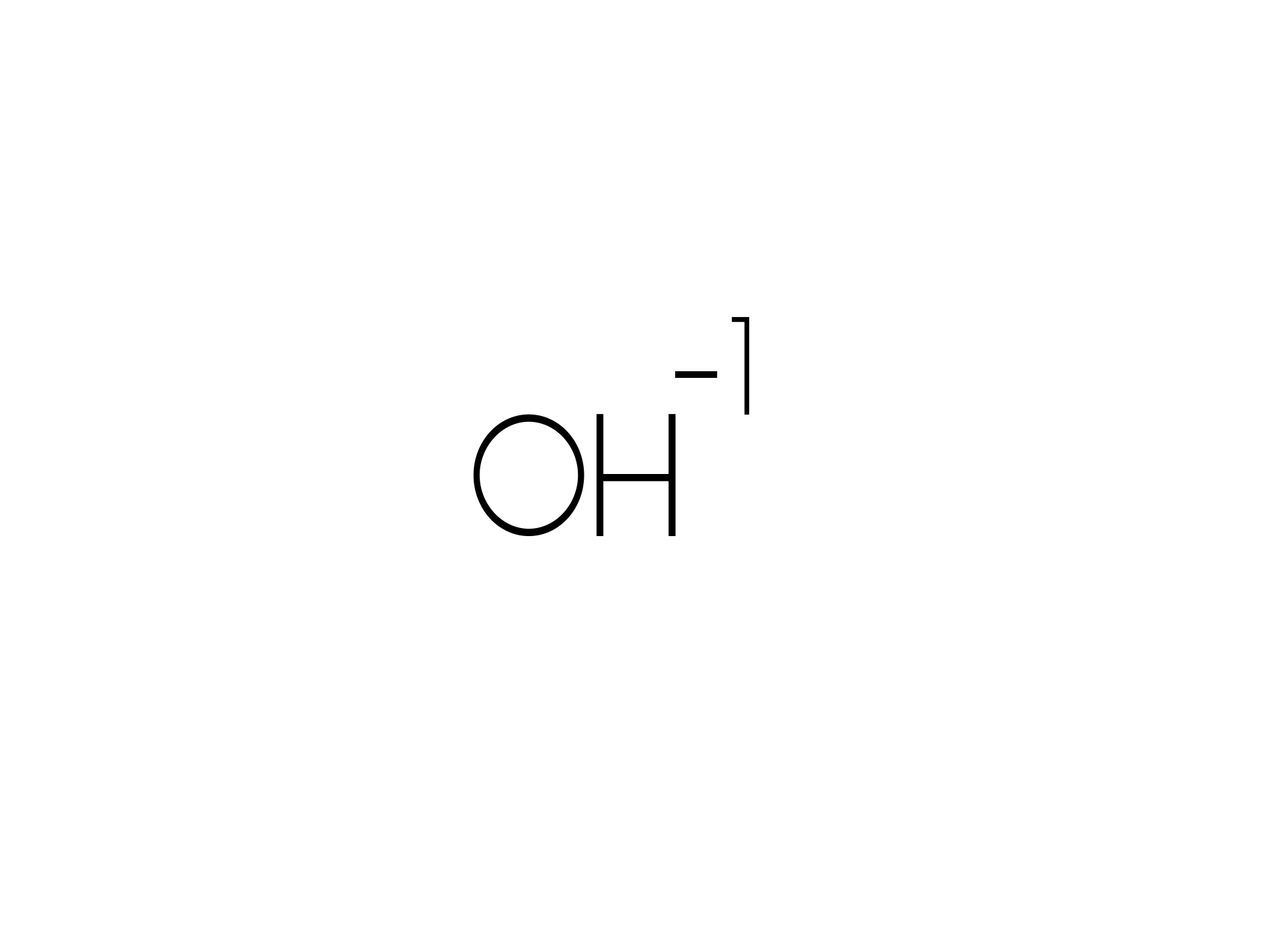
<style>
.page{position:relative;width:1261px;height:946px;background:#ffffff}
.page>*{position:absolute;margin:0}
.t1{font:138.9px "Alcubierre";color:#000000;scale:0.95 1}
.t2{font:162.1px "Alcubierre";color:#000000;scale:0.95 1}
.t3{font:173.6px "Alcubierre";color:#000000;scale:0.95 1}
</style>
<div class="page">
<p class="t1" style="left:731px;top:316px;width:18px;height:99px">1</p>
<p class="t2" style="left:675px;top:371px;width:42px;height:7px">-</p>
<p class="t3" style="left:473px;top:414px;width:203px;height:122px">OH</p>
</div>
